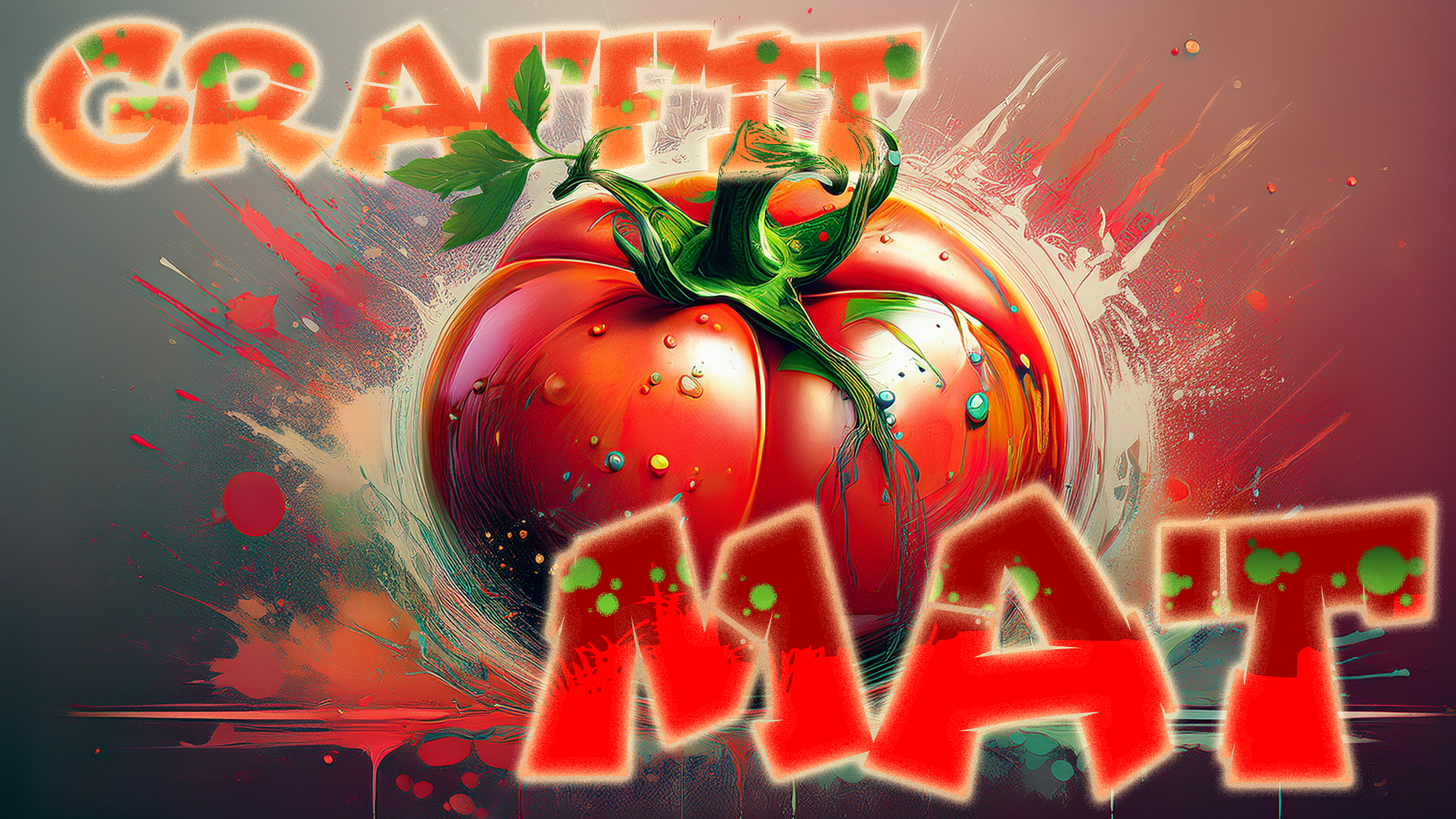
<style>
.page{position:relative;width:1456px;height:819px}
.page>*{position:absolute;margin:0}
.t1{font:151.7px "Jraot";letter-spacing:-0.1em}
.t2{font:303.3px "Jraot";letter-spacing:-0.1em}
</style>
<div class="page">
<p class="t1" style="left:32px;top:23px;width:890px;height:157px">GRAFFIT</p>
<p class="t2" style="left:521px;top:486px;width:911px;height:313px">MAT</p>
</div>
